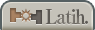
<style>
.page{position:relative;width:95px;height:30px;background:#c5c2b9}
.page>*{position:absolute;margin:0}
.t1{font:20px "RyuminPro-ExBold";letter-spacing:-0.08em;color:#696660;scale:0.9 1}
</style>
<div class="page">
<p class="t1" style="left:45px;top:9px;width:43px;height:15px">Latih.</p>
</div>
